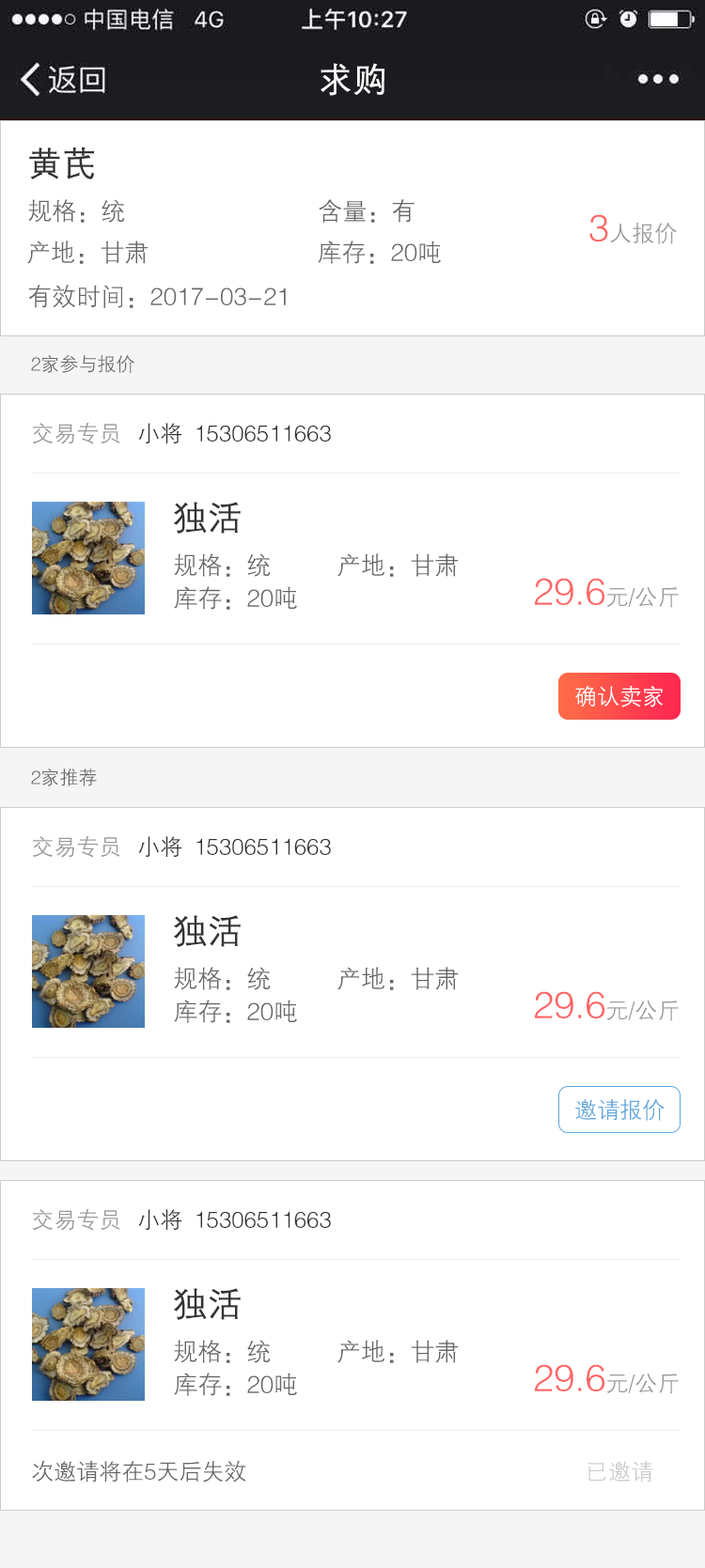
<style>
.page{position:relative;width:705px;height:1568px;background:#ffffff}
.page>*{position:absolute;margin:0}
.t1{font:33.8px "FZZDXJW--GB1-0";color:#ffffff;font-weight:bold}
.t2{font:33.8px "FZZDXJW--GB1-0";color:#333333;font-weight:bold}
.t3{font:24.4px "FZZDXJW--GB1-0";color:#666666}
.t4{font:22.5px "FZZDXJW--GB1-0";color:#999999}
.t5{font:37.6px "FZZDXJW--GB1-0";color:#ff6565}
.t6{font:18.8px "FZZDXJW--GB1-0";color:#666666}
.t7{font:22.5px "FZZDXJW--GB1-0";color:#333333}
.t8{font:22.5px "FZZDXJW--GB1-0";color:#ffffff}
.t9{font:22.5px "FZZDXJW--GB1-0";color:#5fa7de}
.t10{font:22.5px "FZZDXJW--GB1-0";color:#666666}
.t11{font:22.5px "FZZDXJW--GB1-0";color:#cccccc}
</style>
<div class="page">
<p class="t1" style="left:320px;top:63px;width:64px;height:33px">求购</p>
<p class="t2" style="left:29px;top:147px;width:65px;height:32px">黄芪</p>
<p class="t3" style="left:28px;top:199px;width:97px;height:24px">规格：统</p>
<p class="t3" style="left:318px;top:199px;width:96px;height:24px">含量：有</p>
<p class="t4" style="left:589px;top:214px;width:87px;height:30px"><span class="t5">3</span>人报价</p>
<p class="t3" style="left:27px;top:241px;width:121px;height:23px">产地：甘肃</p>
<p class="t3" style="left:318px;top:241px;width:123px;height:23px">库存：20吨</p>
<p class="t3" style="left:28px;top:285px;width:258px;height:23px">有效时间：2017-03-21</p>
<p class="t6" style="left:31px;top:354px;width:103px;height:19px">2家参与报价</p>
<p class="t4" style="left:32px;top:422px;width:88px;height:22px">交易专员</p>
<p class="t7" style="left:138px;top:423px;width:44px;height:21px">小将</p>
<p class="t7" style="left:196px;top:425px;width:135px;height:17px">15306511663</p>
<p class="t2" style="left:174px;top:502px;width:67px;height:32px">独活</p>
<p class="t3" style="left:174px;top:553px;width:97px;height:24px">规格：统</p>
<p class="t3" style="left:337px;top:553px;width:121px;height:24px">产地：甘肃</p>
<p class="t5" style="left:535px;top:578px;width:143px;height:30px">29.6<span class="t4">元/公斤</span></p>
<p class="t3" style="left:174px;top:586px;width:123px;height:24px">库存：20吨</p>
<p class="t8" style="left:575px;top:686px;width:88px;height:21px">确认卖家</p>
<p class="t6" style="left:31px;top:768px;width:66px;height:18px">2家推荐</p>
<p class="t4" style="left:32px;top:835px;width:88px;height:23px">交易专员</p>
<p class="t7" style="left:138px;top:836px;width:44px;height:22px">小将</p>
<p class="t7" style="left:196px;top:838px;width:135px;height:17px">15306511663</p>
<p class="t2" style="left:174px;top:915px;width:67px;height:32px">独活</p>
<p class="t3" style="left:174px;top:967px;width:97px;height:23px">规格：统</p>
<p class="t3" style="left:337px;top:967px;width:121px;height:23px">产地：甘肃</p>
<p class="t3" style="left:174px;top:1000px;width:123px;height:23px">库存：20吨</p>
<p class="t5" style="left:535px;top:991px;width:143px;height:30px">29.6<span class="t4">元/公斤</span></p>
<p class="t9" style="left:575px;top:1099px;width:89px;height:22px">邀请报价</p>
<p class="t4" style="left:32px;top:1208px;width:88px;height:23px">交易专员</p>
<p class="t7" style="left:138px;top:1209px;width:44px;height:22px">小将</p>
<p class="t7" style="left:196px;top:1211px;width:135px;height:17px">15306511663</p>
<p class="t2" style="left:174px;top:1288px;width:67px;height:32px">独活</p>
<p class="t3" style="left:174px;top:1340px;width:97px;height:23px">规格：统</p>
<p class="t3" style="left:337px;top:1340px;width:121px;height:23px">产地：甘肃</p>
<p class="t3" style="left:174px;top:1373px;width:123px;height:23px">库存：20吨</p>
<p class="t5" style="left:535px;top:1364px;width:143px;height:30px">29.6<span class="t4">元/公斤</span></p>
<p class="t10" style="left:32px;top:1460px;width:214px;height:23px">次邀请将在5天后失效</p>
<p class="t11" style="left:588px;top:1461px;width:65px;height:22px">已邀请</p>
</div>
